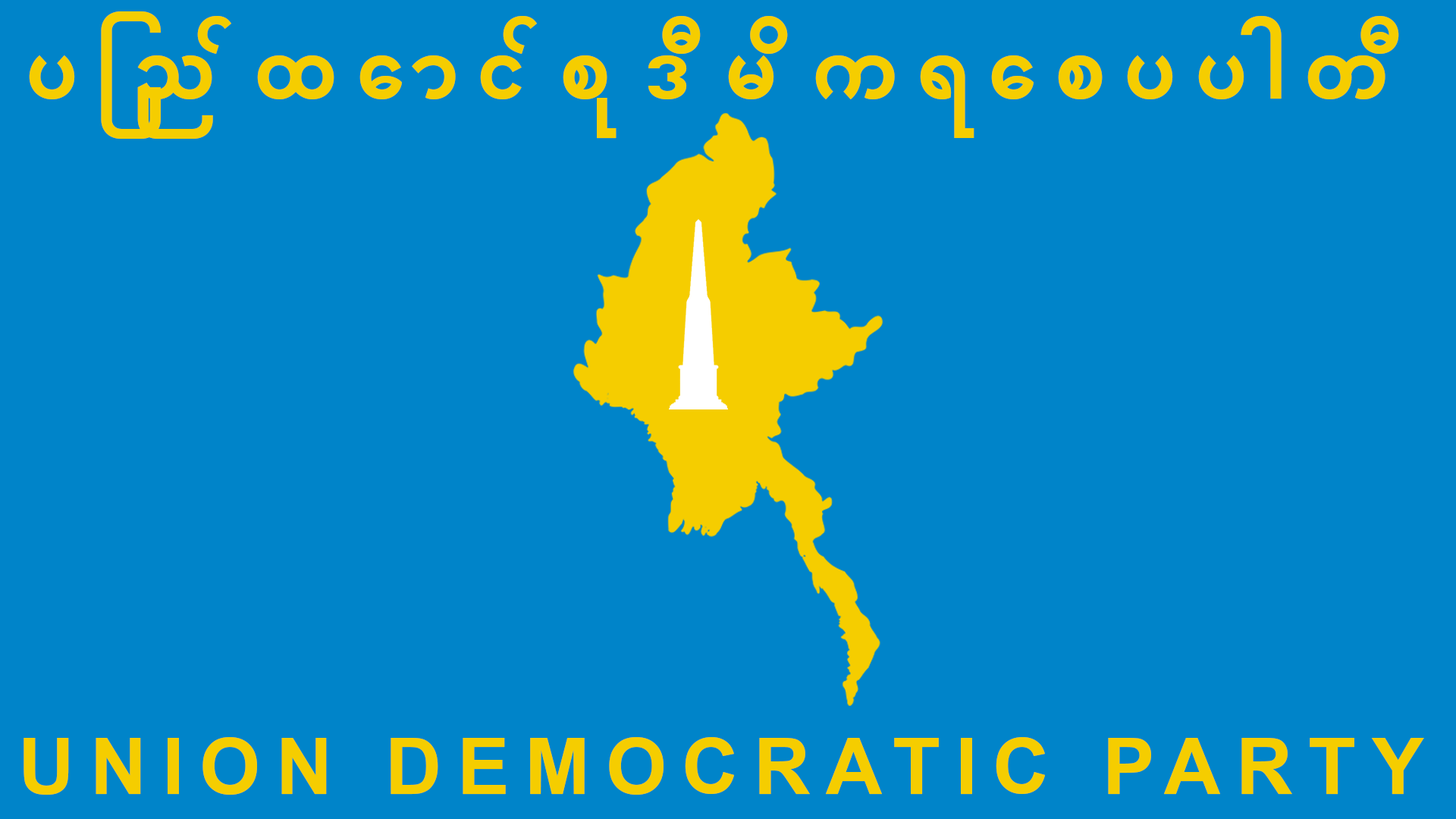
<style>
.page{position:relative;width:1456px;height:819px;background:#0084c9}
.page>*{position:absolute;margin:0}
.t1{font:84px "MyanmarText-Bold";letter-spacing:0.2em;color:#f5cd00}
.t2{font:78.1px "Arial-BoldMT";letter-spacing:0.2em;color:#f5cd00}
</style>
<div class="page">
<p class="t1" style="left:29px;top:11px;width:1370px;height:128px">ပြည်ထောင်စုဒီမိကရေစပပါတီ</p>
<p class="t2" style="left:24px;top:737px;width:1400px;height:58px">UNION DEMOCRATIC PARTY</p>
</div>
